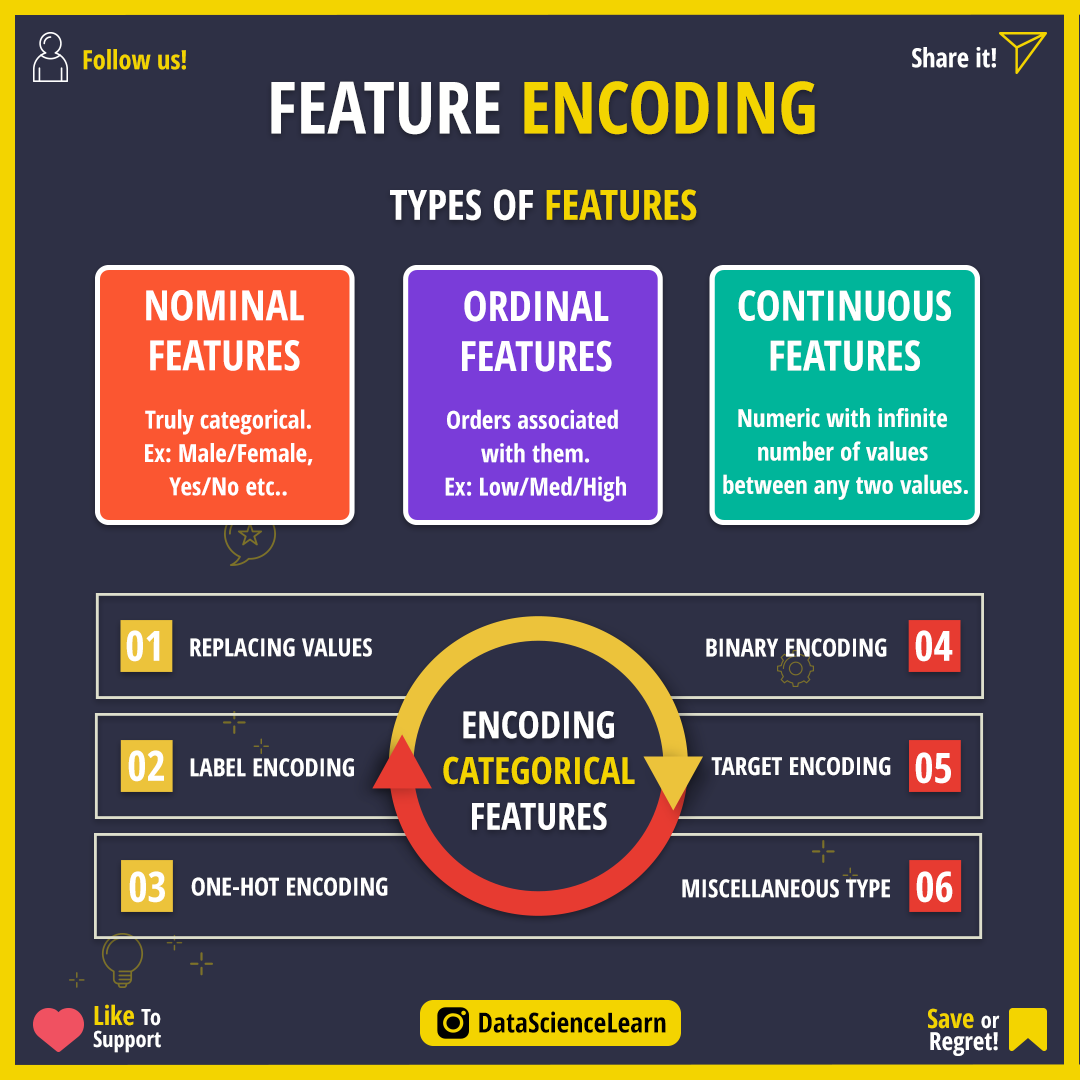
<style>
.page{position:relative;width:1080px;height:1080px;background:#2e3045}
.page>*{position:absolute;margin:0}
.t1{font:26.4px "OpenSans-CondensedBold";color:#f3d400}
.t2{font:26.4px "OpenSans-CondensedBold";color:#ffffff}
.t3{font:72.2px "OpenSans-CondensedBold";color:#f3d400}
.t4{font:72.2px "OpenSans-CondensedBold";color:#fffffe}
.t5{font:41.7px "OpenSans-CondensedBold";color:#ffffff}
.t6{font:41.7px "OpenSans-CondensedBold";color:#f3d400}
.t7{font:41.7px/50px "OpenSans-CondensedBold";color:#ffffff}
.t8{font:25px/33.3px "OpenSans-CondensedBold";color:#ffffff}
.t9{font:25px "OpenSans-CondensedBold";color:#ffffff}
.t10{font:37.5px/45.8px "OpenSans-CondensedBold";color:#f3d400}
.t11{font:37.5px/45.8px "OpenSans-CondensedBold";color:#ffffff}
.t12{font:22.2px/22.2px "OpenSans-CondensedBold";color:#ffffff}
.t13{font:26.4px/22.2px "OpenSans-CondensedBold";color:#f3d400}
.t14{font:27.8px "OpenSans-CondensedBold";color:#000000}
.t15{font:25px/22.2px "OpenSans-CondensedBold";color:#ffffff}
</style>
<div class="page">
<p class="t1" style="left:83px;top:49px;width:103px;height:21px">Follow us!</p>
<p class="t2" style="left:912px;top:47px;width:84px;height:21px">Share it!</p>
<p class="t3" style="left:271px;top:81px;width:544px;height:54px"><span class="t4">FEATURE </span>ENCODING</p>
<p class="t5" style="left:390px;top:189px;width:307px;height:32px">TYPES OF <span class="t6">FEATURES</span></p>
<p class="t7" style="left:146px;top:290px;width:158px;height:81px;text-align:center">NOMINAL<br>FEATURES</p>
<p class="t7" style="left:462px;top:290px;width:150px;height:82px;text-align:center">ORDINAL<br>FEATURES</p>
<p class="t7" style="left:738px;top:290px;width:213px;height:81px;text-align:center">CONTINUOUS<br>FEATURES</p>
<p class="t8" style="left:145px;top:409px;width:168px;height:87px;text-align:center">Truly categorical.<br>Ex: Male/Female,<br>Yes/No etc..</p>
<p class="t8" style="left:445px;top:409px;width:181px;height:93px;text-align:center">Orders associated <br>with them.<br>Ex: Low/Med/High</p>
<p class="t8" style="left:723px;top:408px;width:245px;height:92px;text-align:center">Numeric with infinite <br>number of values <br>between any two values.</p>
<p class="t5" style="left:126px;top:630px;width:34px;height:32px">01</p>
<p class="t5" style="left:915px;top:630px;width:38px;height:32px">04</p>
<p class="t9" style="left:190px;top:638px;width:182px;height:19px">REPLACING VALUES</p>
<p class="t9" style="left:706px;top:638px;width:181px;height:19px">BINARY ENCODING</p>
<p class="t10" style="left:443px;top:711px;width:192px;height:119px;text-align:center"><span class="t11">ENCODING<br></span>CATEGORICAL<br><span class="t11">FEATURES</span></p>
<p class="t5" style="left:128px;top:750px;width:36px;height:32px">02</p>
<p class="t9" style="left:190px;top:758px;width:164px;height:19px">LABEL ENCODING</p>
<p class="t9" style="left:711px;top:757px;width:180px;height:19px">TARGET ENCODING</p>
<p class="t5" style="left:915px;top:752px;width:36px;height:32px">05</p>
<p class="t5" style="left:129px;top:871px;width:36px;height:32px">03</p>
<p class="t9" style="left:191px;top:877px;width:197px;height:19px">ONE-HOT ENCODING</p>
<p class="t9" style="left:682px;top:879px;width:208px;height:19px">MISCELLANEOUS TYPE</p>
<p class="t5" style="left:916px;top:871px;width:37px;height:32px">06</p>
<p class="t12" style="left:93px;top:1004px;width:68px;height:49px"><span class="t13">Like </span>To<br>Support</p>
<p class="t14" style="left:479px;top:1011px;width:187px;height:22px">DataScienceLearn</p>
<p class="t15" style="left:928px;top:1008px;width:72px;height:48px;text-align:right"><span class="t13">Save </span><span class="t12">or<br></span>Regret!</p>
</div>
